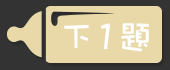
<style>
.page{position:relative;width:170px;height:70px;background:#e9d9a8}
.page>*{position:absolute;margin:0}
.t1{font:36px "DFWaWa-W7-HKP-BF";letter-spacing:-0.05em;color:#ffffff;scale:0.95 1}
</style>
<div class="page">
<p class="t1" style="left:64px;top:23px;width:85px;height:29px">下1題</p>
</div>
